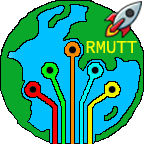
<style>
.page{position:relative;width:144px;height:144px;background:#00c0ff}
.page>*{position:absolute;margin:0}
.t1{font:17.8px "SourceCodePro-Regular";letter-spacing:-0.025em;color:#f0ff00}
</style>
<div class="page">
<p class="t1" style="left:86px;top:41px;width:51px;height:13px">RMUTT</p>
</div>
